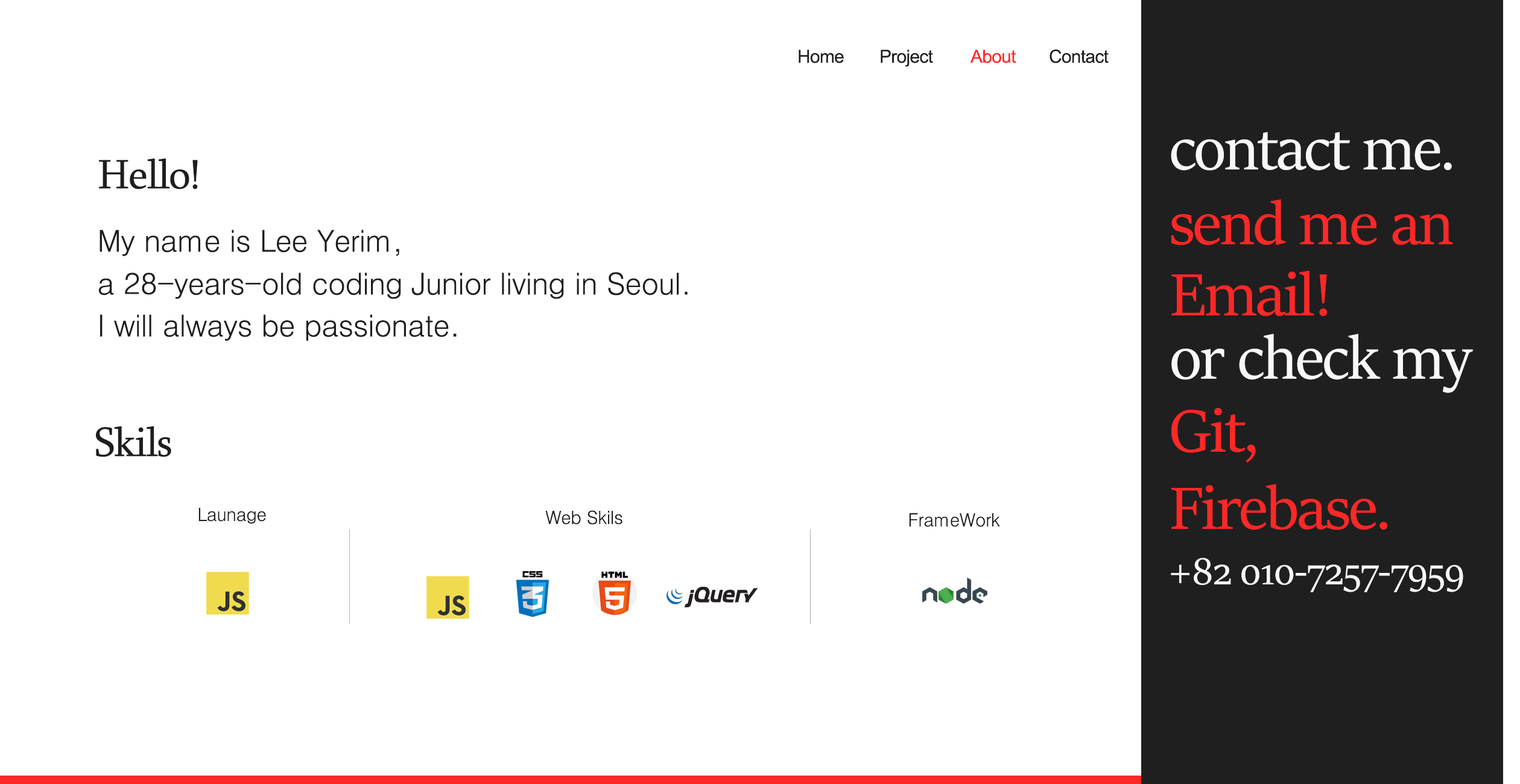
<style>
.page{position:relative;width:1520px;height:784px;background:#ffffff}
.page>*{position:absolute;margin:0}
.t1{font:18.1px "ArialMT";letter-spacing:-0.025em;color:#1f1f1f}
.t2{font:18.1px "ArialMT";letter-spacing:-0.025em;color:#fe2827}
.t3{font:66.4px "SitkaDisplay";letter-spacing:-0.025em;color:#f8f8f8}
.t4{font:42.2px "Sylfaen";letter-spacing:-0.025em;color:#1e1e1e}
.t5{font:66.4px "SitkaDisplay";letter-spacing:-0.025em;color:#fe2827}
.t6{font:30.2px "Dotum";letter-spacing:-0.025em;color:#1e1e1e}
.t7{font:18.1px "Dotum";letter-spacing:-0.025em;color:#1e1e1e}
.t8{font:42.2px "SitkaBanner";letter-spacing:-0.025em;color:#f8f8f8}
</style>
<div class="page">
<p class="t1" style="left:799px;top:49px;width:45px;height:14px">Home</p>
<p class="t1" style="left:881px;top:49px;width:52px;height:18px">Project</p>
<p class="t2" style="left:970px;top:49px;width:47px;height:14px">About</p>
<p class="t1" style="left:1050px;top:49px;width:59px;height:14px">Contact</p>
<p class="t3" style="left:1171px;top:132px;width:281px;height:39px">contact me.</p>
<p class="t4" style="left:99px;top:158px;width:99px;height:31px">Hello!</p>
<p class="t5" style="left:1172px;top:199px;width:281px;height:47px">send me an</p>
<p class="t6" style="left:100px;top:230px;width:299px;height:26px">My name is Lee Yerim,</p>
<p class="t6" style="left:98px;top:272px;width:590px;height:27px">a 28-years-old coding Junior living in Seoul.</p>
<p class="t5" style="left:1172px;top:270px;width:156px;height:47px">Email!</p>
<p class="t6" style="left:100px;top:314px;width:357px;height:27px">I will always be passionate.</p>
<p class="t3" style="left:1172px;top:334px;width:301px;height:59px">or check my</p>
<p class="t5" style="left:1172px;top:408px;width:84px;height:55px">Git,</p>
<p class="t4" style="left:96px;top:426px;width:75px;height:31px">Skils</p>
<p class="t5" style="left:1172px;top:484px;width:216px;height:46px">Firebase.</p>
<p class="t7" style="left:198px;top:508px;width:68px;height:16px">Launage</p>
<p class="t7" style="left:545px;top:510px;width:78px;height:15px">Web Skils</p>
<p class="t7" style="left:909px;top:513px;width:91px;height:14px">FrameWork</p>
<p class="t8" style="left:1171px;top:558px;width:293px;height:34px">+82 010-7257-7959</p>
</div>
